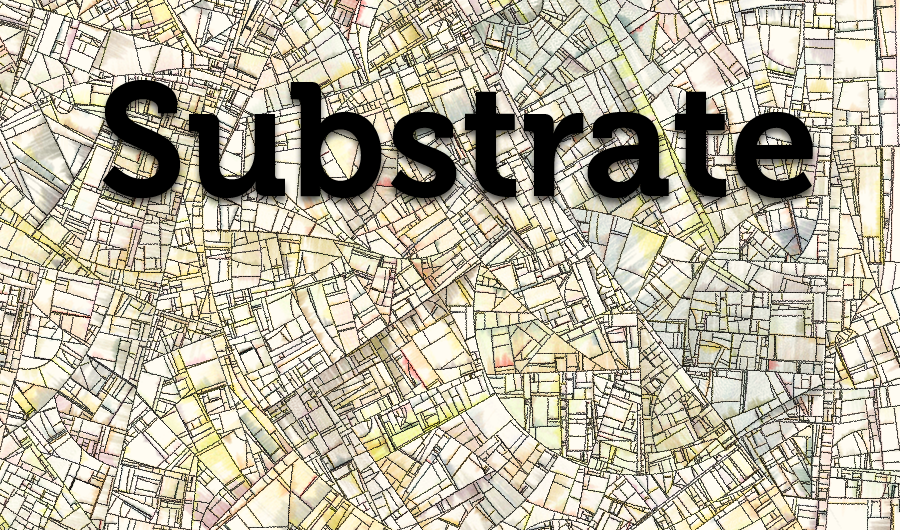
<style>
.page{position:relative;width:900px;height:530px}
.page>*{position:absolute;margin:0}
.t1{font:160px "Museo-700";color:#000000}
</style>
<div class="page">
<p class="t1" style="left:102px;top:80px;width:711px;height:119px">Substrate</p>
</div>
